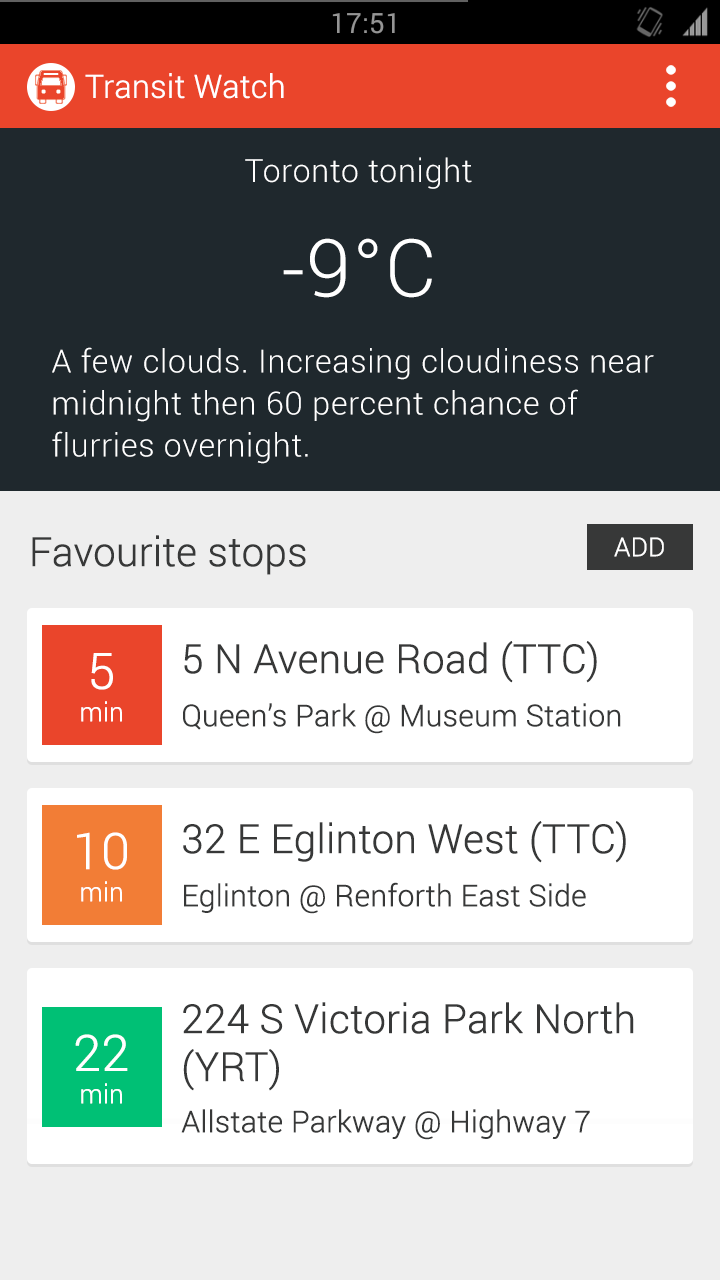
<style>
.page{position:relative;width:720px;height:1280px;background:#ffffff}
.page>*{position:absolute;margin:0}
.t1{font:32px "Roboto-Light";letter-spacing:-0.015em;color:#ffffff;font-weight:bold}
.t2{font:32px "Roboto-Light";letter-spacing:0.025em;color:#ffffff}
.t3{font:80px "Roboto-Light";letter-spacing:0.025em;color:#ffffff}
.t4{font:32px/42px "Roboto-Light";letter-spacing:0.025em;color:#ffffff}
.t5{font:40px "Roboto-Light";letter-spacing:-0.015em;color:#373838;font-weight:bold}
.t6{font:26px "Roboto-Light";letter-spacing:-0.015em;color:#ffffff;font-weight:bold}
.t7{font:50px "Roboto-Light";letter-spacing:-0.015em;color:#ffffff;font-weight:bold}
.t8{font:30px "Roboto-Light";letter-spacing:-0.015em;color:#373838;font-weight:bold}
</style>
<div class="page">
<p class="t1" style="left:85px;top:73px;width:199px;height:26px">Transit Watch</p>
<p class="t2" style="left:245px;top:157px;width:227px;height:32px">Toronto tonight</p>
<p class="t3" style="left:283px;top:238px;width:149px;height:60px">-9°C</p>
<p class="t4" style="left:52px;top:347px;width:602px;height:117px">A few clouds. Increasing cloudiness near midnight then 60 percent chance of flurries overnight.</p>
<p class="t5" style="left:32px;top:535px;width:274px;height:40px">Favourite stops</p>
<p class="t6" style="left:614px;top:537px;width:50px;height:20px">ADD</p>
<p class="t5" style="left:184px;top:641px;width:413px;height:42px">5 N Avenue Road (TTC)</p>
<p class="t7" style="left:91px;top:653px;width:22px;height:37px">5</p>
<p class="t6" style="left:81px;top:701px;width:41px;height:21px">min</p>
<p class="t8" style="left:183px;top:703px;width:438px;height:31px">Queen’s Park @ Museum Station</p>
<p class="t5" style="left:183px;top:821px;width:443px;height:42px">32 E Eglinton West (TTC)</p>
<p class="t7" style="left:77px;top:832px;width:50px;height:38px">10</p>
<p class="t6" style="left:81px;top:881px;width:41px;height:21px">min</p>
<p class="t8" style="left:184px;top:882px;width:402px;height:32px">Eglinton @ Renforth East Side</p>
<p class="t5" style="left:183px;top:1002px;width:451px;height:89px">224 S Victoria Park North (YRT)</p>
<p class="t7" style="left:75px;top:1034px;width:53px;height:37px">22</p>
<p class="t6" style="left:81px;top:1083px;width:41px;height:21px">min</p>
<p class="t8" style="left:181px;top:1109px;width:409px;height:31px">Allstate Parkway @ Highway 7</p>
</div>
